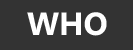
<style>
.page{position:relative;width:133px;height:50px;background:#333333}
.page>*{position:absolute;margin:0}
.t1{font:31.9px "MicrosoftPhagsPa-Bold";color:#ffffff}
</style>
<div class="page">
<p class="t1" style="left:27px;top:12px;width:80px;height:24px">WHO</p>
</div>
